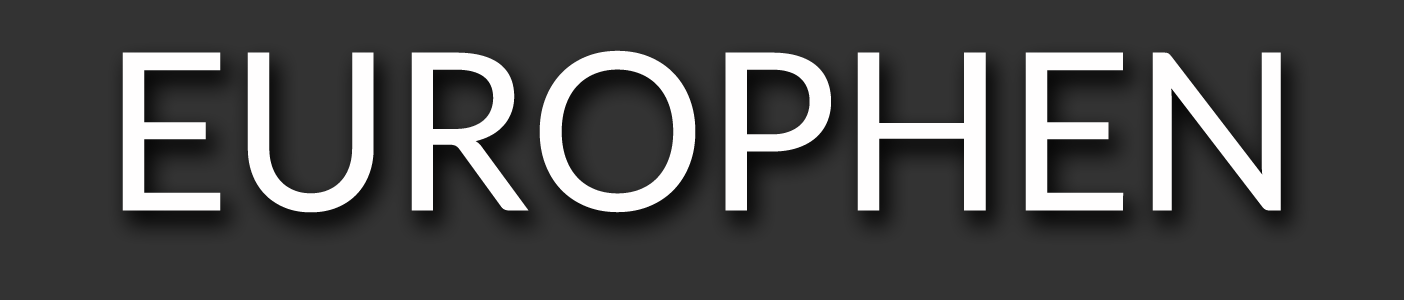
<style>
.page{position:relative;width:1404px;height:300px;background:#333333}
.page>*{position:absolute;margin:0}
.t1{font:220px "Lato-Regular";color:#fffefe}
</style>
<div class="page">
<p class="t1" style="left:122px;top:50px;width:1159px;height:163px">EUROPHEN</p>
</div>
